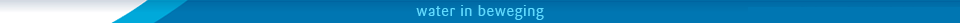
<style>
.page{position:relative;width:960px;height:23px;background:#0076b2}
.page>*{position:absolute;margin:0}
.t1{font:15px "SariOffc";letter-spacing:0.04em;color:#5fdbff}
</style>
<div class="page">
<p class="t1" style="left:416px;top:5px;width:128px;height:15px">water in beweging</p>
</div>
